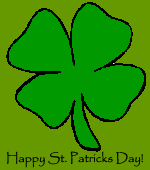
<style>
.page{position:relative;width:150px;height:170px;background:#669900}
.page>*{position:absolute;margin:0}
.t1{font:12.5px "Papyrus-Regular";color:#000000}
</style>
<div class="page">
<p class="t1" style="left:7px;top:151px;width:136px;height:17px">Happy St. Patricks Day!</p>
</div>
